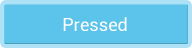
<style>
.page{position:relative;width:192px;height:48px;background:#5cc4ea}
.page>*{position:absolute;margin:0}
.t1{font:18px "Roboto-Regular";color:#ffffff}
</style>
<div class="page">
<p class="t1" style="left:63px;top:17px;width:64px;height:14px">Pressed</p>
</div>
